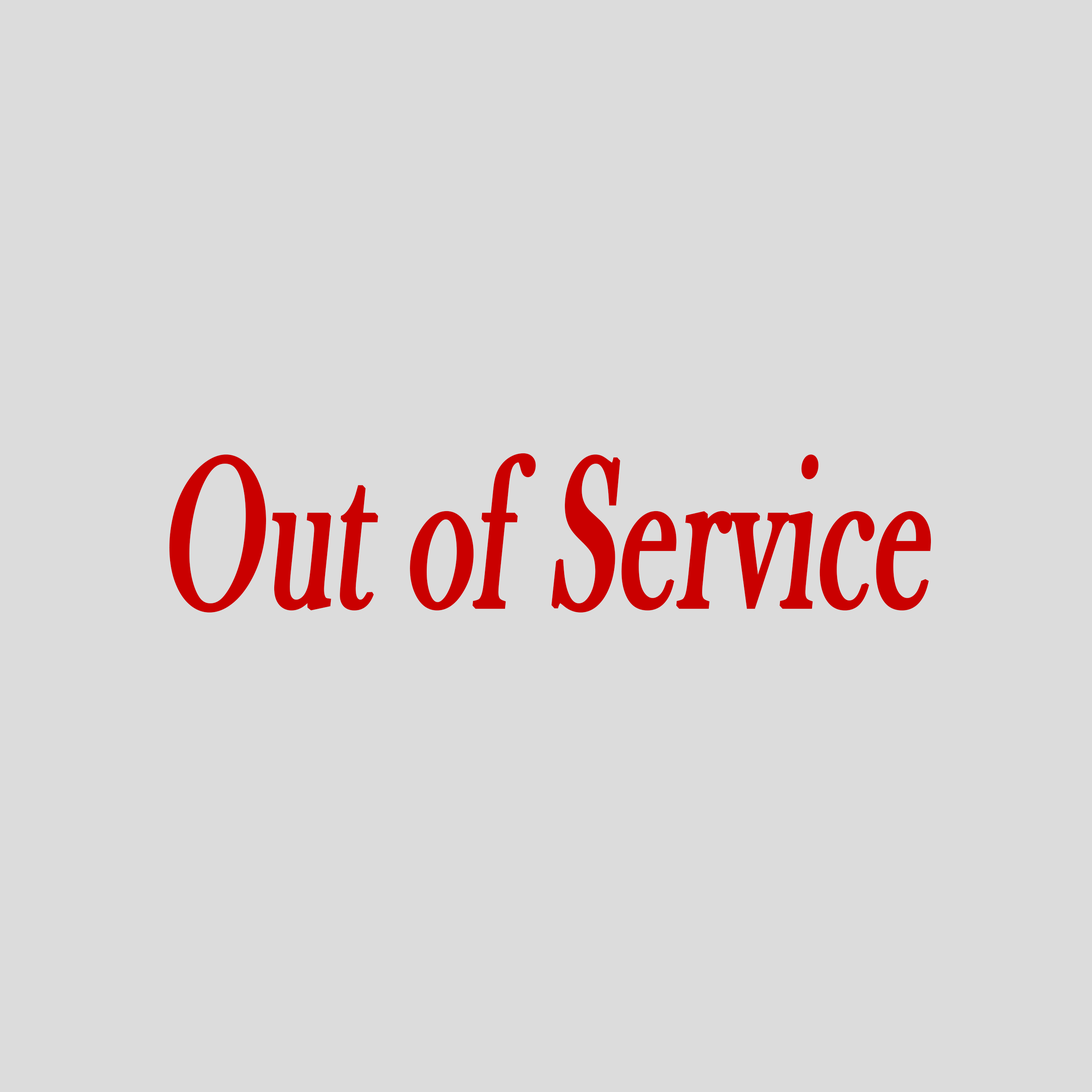
<style>
.page{position:relative;width:1092px;height:1092px;background:#dcdcdc}
.page>*{position:absolute;margin:0}
.t1{font:217.2px "BaskOldFace";letter-spacing:0.005em;color:#ca0000;font-weight:bold;font-style:italic;scale:0.57 1}
</style>
<div class="page">
<p class="t1" style="left:169px;top:453px;width:762px;height:160px">Out of Service</p>
</div>
